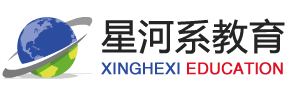
<style>
.page{position:relative;width:300px;height:100px;background:#ffffff}
.page>*{position:absolute;margin:0}
.t1{font:36px "MicrosoftYaHei";color:#252424;font-weight:bold}
.t2{font:16px "CTZhongYuanSJ";color:#dc1326;font-weight:bold}
.t3{font:16px "CTZhongYuanSJ";color:#2c4c9f;font-weight:bold}
</style>
<div class="page">
<p class="t1" style="left:101px;top:18px;width:184px;height:36px">星河系教育</p>
<p class="t2" style="left:101px;top:62px;width:182px;height:13px"><span class="t3">XINGHEXI </span>EDUCATION</p>
</div>
